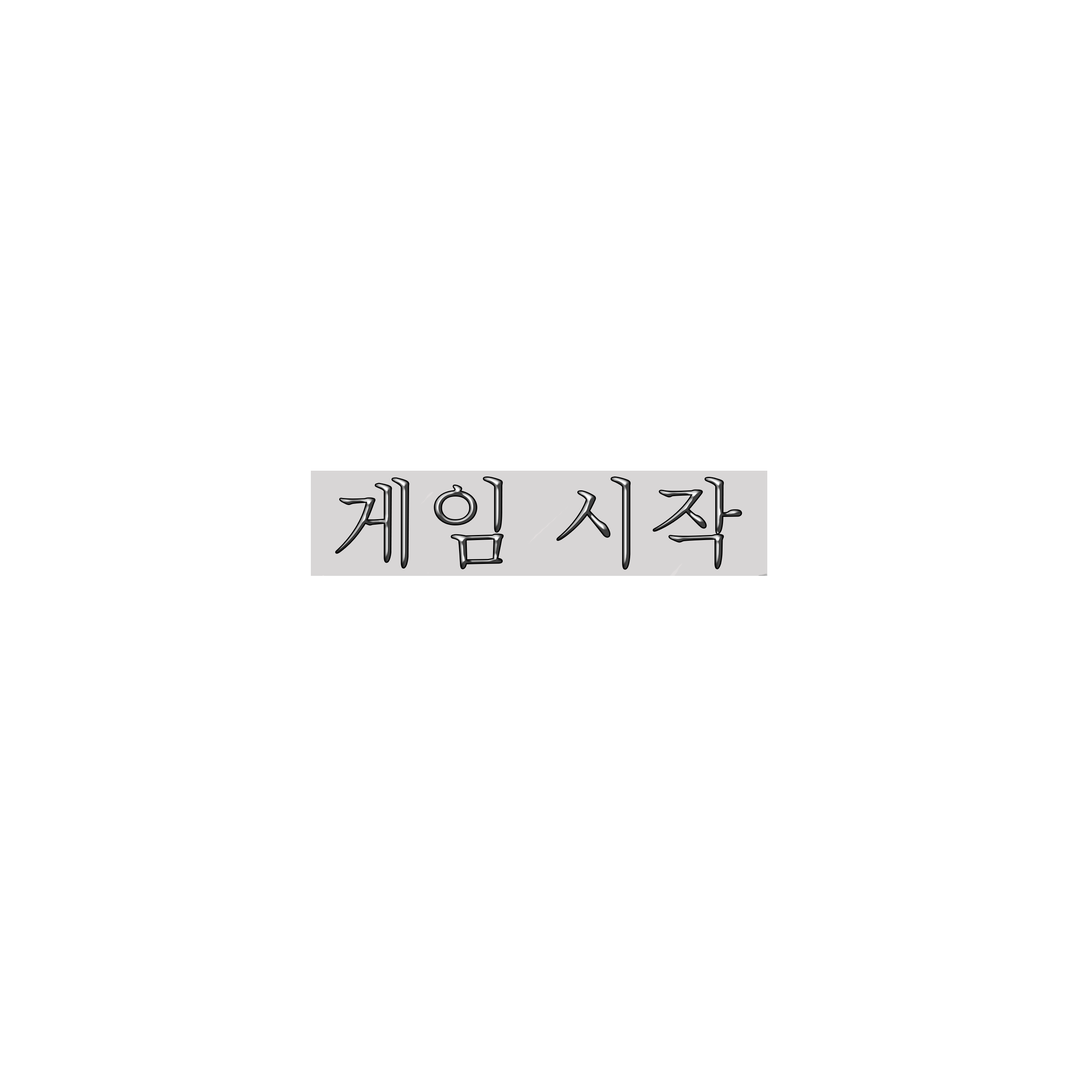
<style>
.page{position:relative;width:1092px;height:1092px;background:#ffffff}
.page>*{position:absolute;margin:0}
.t1{font:96.3px "Batang"}
</style>
<div class="page">
<p class="t1" style="left:336px;top:477px;width:405px;height:92px">게임 시작</p>
</div>
